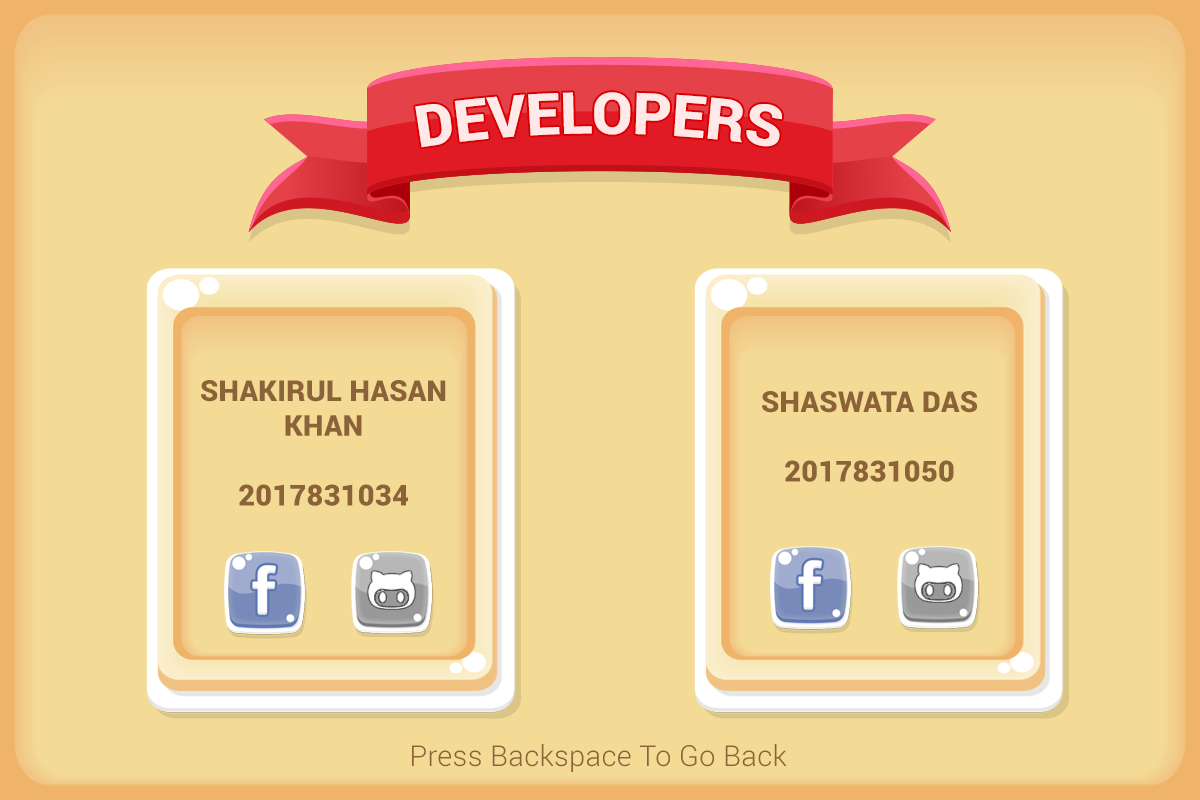
<style>
.page{position:relative;width:1200px;height:800px;background:#f3db95}
.page>*{position:absolute;margin:0}
.t1{font:57px "Roboto-Black";letter-spacing:0.01em;color:#ffffff}
.t2{font:29px "Roboto-Black";letter-spacing:0.01em;color:#8c6239}
.t3{font:29px "Roboto-Light";letter-spacing:0.01em;color:#8c6239}
</style>
<div class="page">
<p class="t1" style="left:415px;top:92px;width:367px;height:56px">DEVELOPERS</p>
<p class="t2" style="left:201px;top:380px;width:245px;height:126px;text-align:center">SHAKIRUL HASAN<br>KHAN<br><br>2017831034</p>
<p class="t2" style="left:762px;top:391px;width:215px;height:91px;text-align:center">SHASWATA DAS<br><br>2017831050</p>
<p class="t3" style="left:412px;top:744px;width:375px;height:28px">Press Backspace To Go Back</p>
</div>
